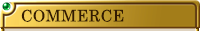
<style>
.page{position:relative;width:200px;height:31px}
.page>*{position:absolute;margin:0}
.t1{font:16px "CenturySchoolbook";letter-spacing:0.025em;color:#321a02}
</style>
<div class="page">
<p class="t1" style="left:21px;top:9px;width:103px;height:13px">COMMERCE</p>
</div>
